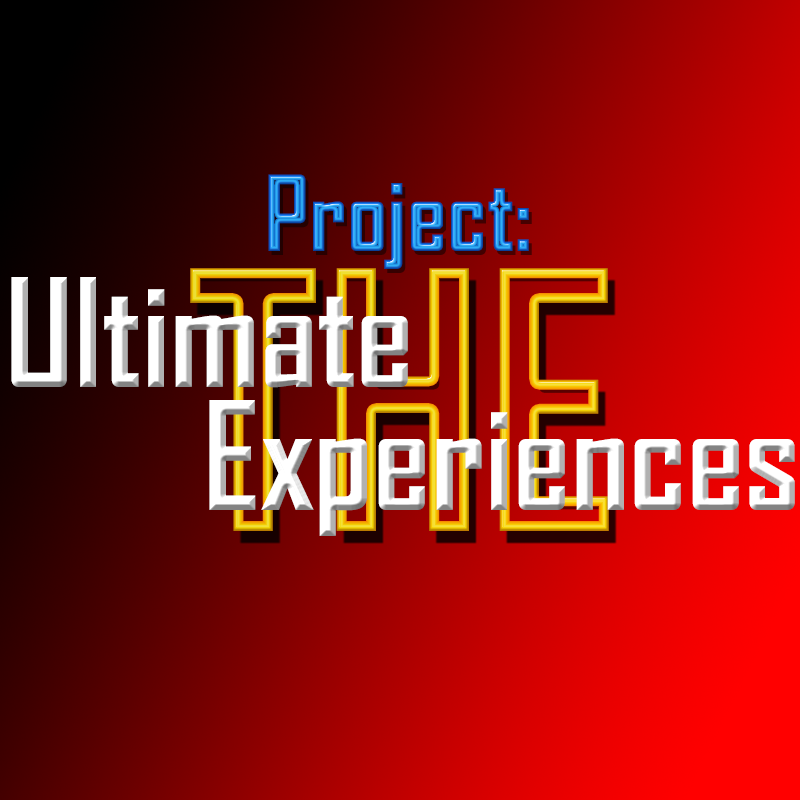
<style>
.page{position:relative;width:800px;height:800px}
.page>*{position:absolute;margin:0}
.t1{font:100px "AgencyFB-Bold"}
.t2{font:144px "AgencyFB-Bold";color:#ffffff}
</style>
<div class="page">
<p class="t1" style="left:268px;top:174px;width:261px;height:95px">Project:</p>
<p class="t2" style="left:11px;top:277px;width:397px;height:111px">Ultimate</p>
<p class="t2" style="left:209px;top:400px;width:586px;height:136px">Experiences</p>
</div>
